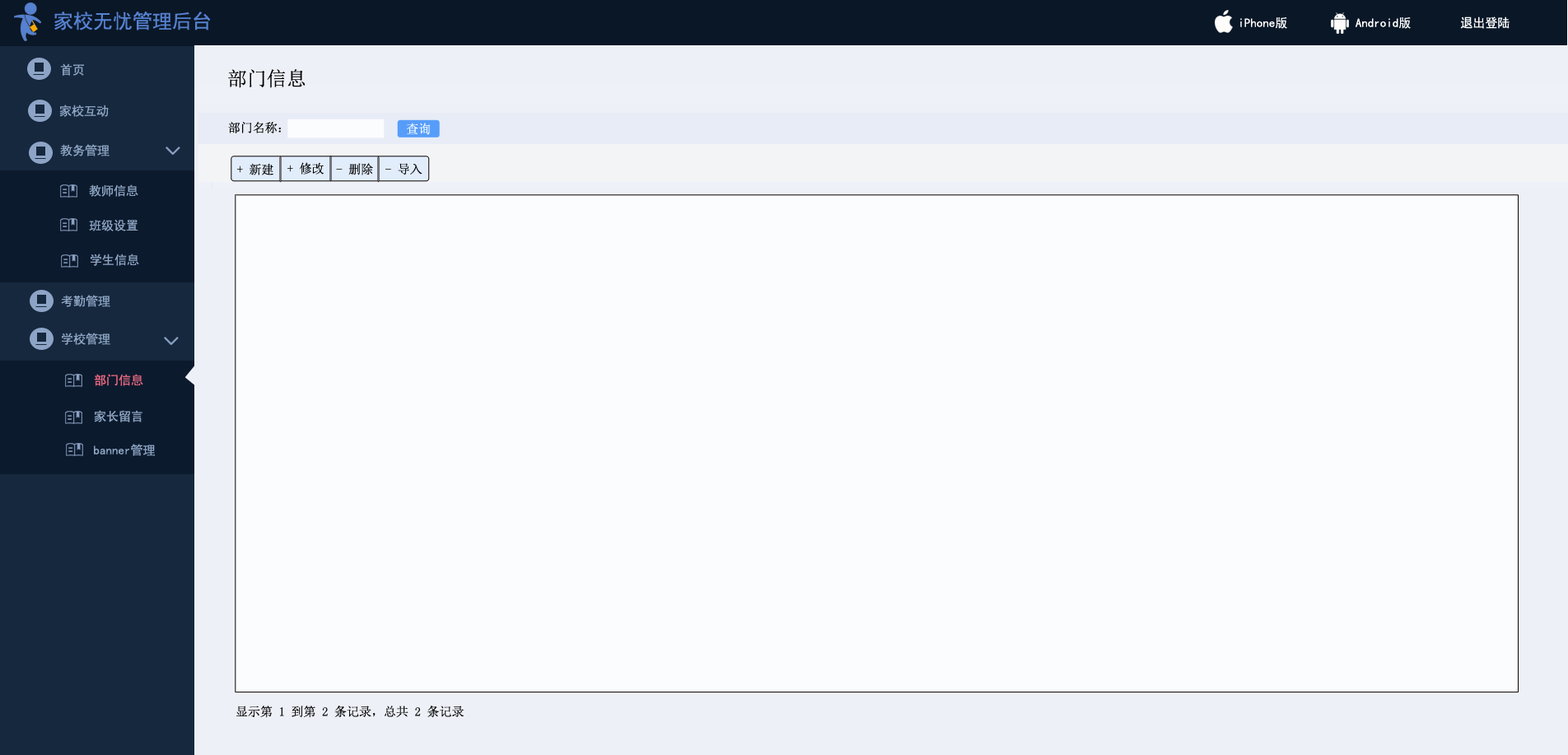
<style>
.page{position:relative;width:1568px;height:755px;background:#fbfcfe}
.page>*{position:absolute;margin:0}
.t1{font:19.8px "SimHei";color:#5681d0}
.t2{font:12.4px "SimHei";color:#ffffff}
.t3{font:12.4px "SimHei";color:#8ea5c3}
.t4{font:19.8px "SimSun";color:#010101}
.t5{font:12.4px "SimSun";color:#010101}
.t6{font:12.4px "SimSun";color:#fbfcfe}
.t7{font:12.4px "SimSun";color:#060606}
.t8{font:12.4px "SimHei";color:#e96880}
</style>
<div class="page">
<p class="t1" style="left:54px;top:12px;width:157px;height:18px">家校无忧管理后台</p>
<p class="t2" style="left:1240px;top:16px;width:270px;height:13px">iPhone版           Android版        退出登陆</p>
<p class="t3" style="left:60px;top:63px;width:24px;height:13px">首页</p>
<p class="t4" style="left:228px;top:69px;width:78px;height:19px">部门信息</p>
<p class="t3" style="left:59px;top:105px;width:50px;height:12px">家校互动</p>
<p class="t5" style="left:228px;top:122px;width:53px;height:11px">部门名称：</p>
<p class="t6" style="left:406px;top:123px;width:24px;height:12px">查询</p>
<p class="t3" style="left:60px;top:144px;width:50px;height:12px">教务管理</p>
<p class="t7" style="left:237px;top:163px;width:36px;height:12px">+ 新建</p>
<p class="t7" style="left:287px;top:162px;width:37px;height:13px">+ 修改</p>
<p class="t7" style="left:336px;top:163px;width:37px;height:12px">- 删除</p>
<p class="t7" style="left:385px;top:163px;width:37px;height:12px">- 导入</p>
<p class="t3" style="left:89px;top:184px;width:49px;height:13px">教师信息</p>
<p class="t3" style="left:89px;top:219px;width:49px;height:12px">班级设置</p>
<p class="t3" style="left:91px;top:254px;width:48px;height:12px">学生信息</p>
<p class="t3" style="left:61px;top:295px;width:49px;height:12px">考勤管理</p>
<p class="t3" style="left:62px;top:333px;width:48px;height:12px">学校管理</p>
<p class="t8" style="left:94px;top:374px;width:49px;height:12px">部门信息</p>
<p class="t3" style="left:94px;top:410px;width:48px;height:12px">家长留言</p>
<p class="t3" style="left:94px;top:444px;width:61px;height:12px">banner管理</p>
<p class="t7" style="left:236px;top:706px;width:228px;height:12px">显示第 1 到第 2 条记录，总共 2 条记录</p>
</div>
